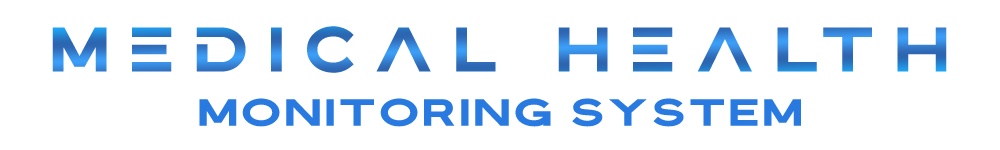
<style>
.page{position:relative;width:1000px;height:150px;background:#ffffff}
.page>*{position:absolute;margin:0}
.t1{font:55.6px "Bristone";letter-spacing:0.36em}
.t2{font:33.3px "Bristone";letter-spacing:0.08em;color:#287ae1;scale:1.14 1}
</style>
<div class="page">
<p class="t1" style="left:52px;top:26px;width:895px;height:47px">medical health</p>
<p class="t2" style="left:199px;top:98px;width:602px;height:29px">MONITORING SYSTEM</p>
</div>
